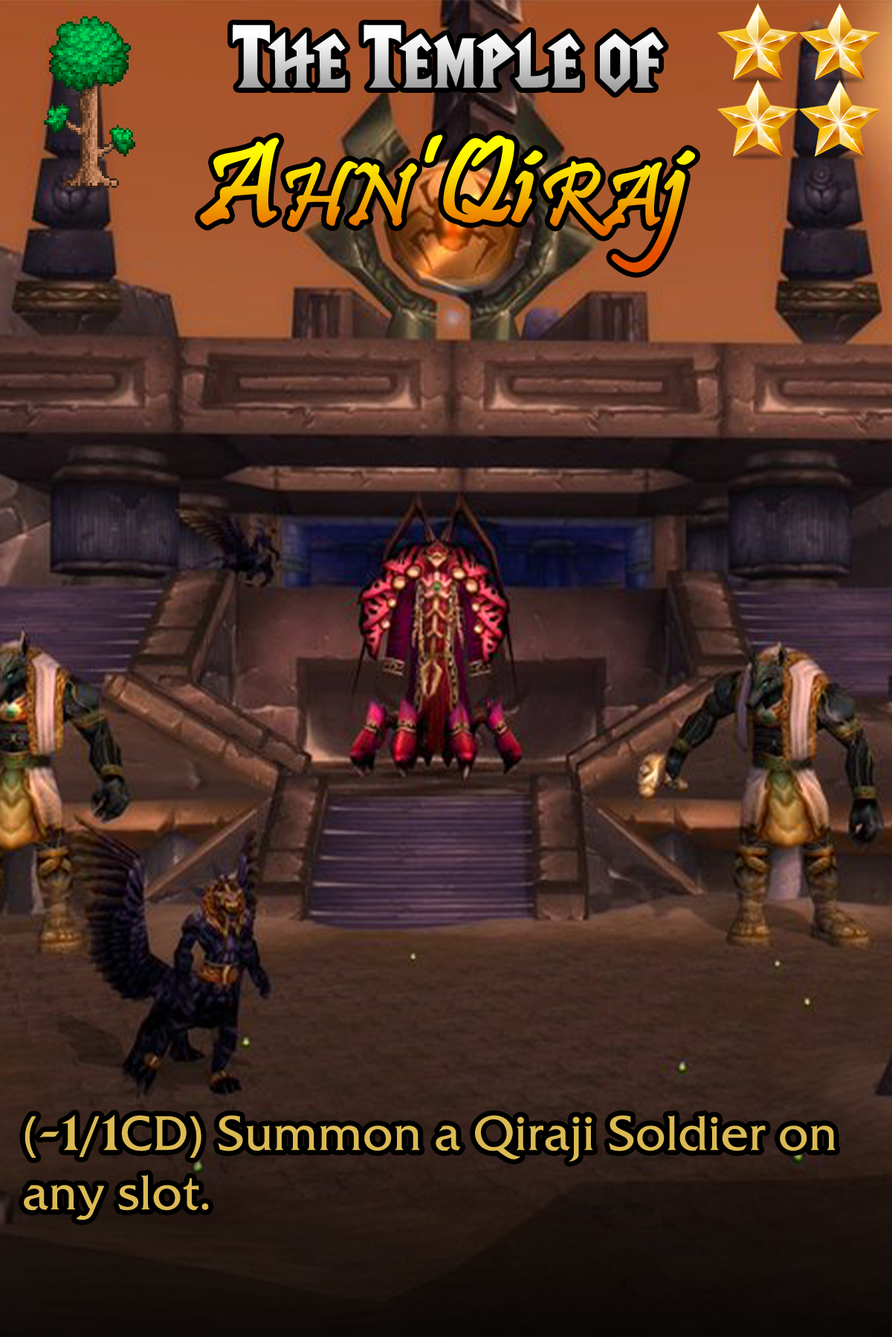
<style>
.page{position:relative;width:892px;height:1337px}
.page>*{position:absolute;margin:0}
.t1{font:89.2px "LifeCraft"}
.t2{font:118.9px "Pristina-Regular";font-weight:bold}
.t3{font:89.2px "Pristina-Regular";font-weight:bold}
.t4{font:48.3px "FrizQua-ReguOS";color:#dcba53}
.t5{font:59.4px "FrizQua-ReguOS";color:#dcba53}
.t6{font:66.9px "FrizQua-ReguOS";color:#dcba53}
</style>
<div class="page">
<p class="t1" style="left:233px;top:25px;width:431px;height:68px">The Temple of</p>
<p class="t2" style="left:200px;top:134px;width:495px;height:139px">A<span class="t3">HN</span>’Qi<span class="t3">RA</span>j</p>
<p class="t4" style="left:24px;top:1115px;width:811px;height:106px">(<span class="t5">-</span><span class="t6">1</span>/<span class="t6">1</span>CD) Summon a Qiraji Soldier on any slot.</p>
</div>
